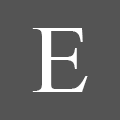
<style>
.page{position:relative;width:120px;height:120px;background:#545454}
.page>*{position:absolute;margin:0}
.t1{font:96px "TimesNewRomanPSMT";color:#ffffff}
</style>
<div class="page">
<p class="t1" style="left:32px;top:28px;width:56px;height:64px">E</p>
</div>
